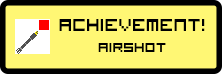
<style>
.page{position:relative;width:222px;height:74px;background:#fff774}
.page>*{position:absolute;margin:0}
.t1{font:23px "VisitorTT1BRK";color:#000000}
.t2{font:18px "VisitorTT1BRK";color:#000000}
</style>
<div class="page">
<p class="t1" style="left:59px;top:19px;width:146px;height:33px;text-align:center">achievement!<br><span class="t2">Airshot</span></p>
</div>
